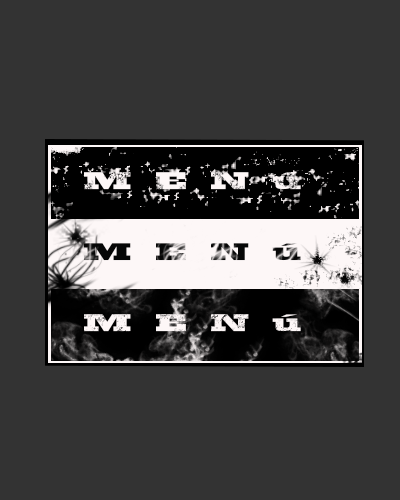
<style>
.page{position:relative;width:400px;height:500px;background:#333333}
.page>*{position:absolute;margin:0}
.t1{font:25.2px "Playbill";letter-spacing:0.2em;color:#fdf7f7;scale:4.3 1}
.t2{font:25.2px "Playbill";letter-spacing:0.2em;scale:4.3 1}
</style>
<div class="page">
<p class="t1" style="left:84px;top:172px;width:217px;height:18px">MENú</p>
<p class="t2" style="left:84px;top:243px;width:217px;height:18px">MENú</p>
<p class="t1" style="left:84px;top:314px;width:217px;height:18px">MENú</p>
</div>
